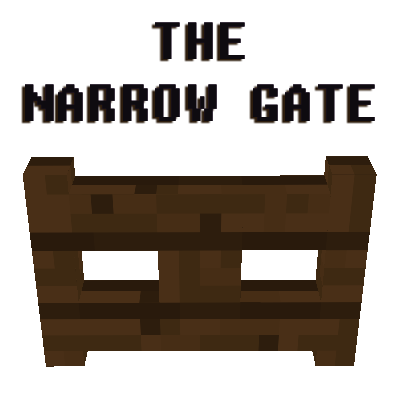
<style>
.page{position:relative;width:400px;height:400px;background:#ffffff}
.page>*{position:absolute;margin:0}
.t1{font:52px "Fixedsys";color:#0e0b10}
</style>
<div class="page">
<p class="t1" style="left:25px;top:22px;width:350px;height:99px;text-align:center">THE<br>NARROW GATE</p>
</div>
